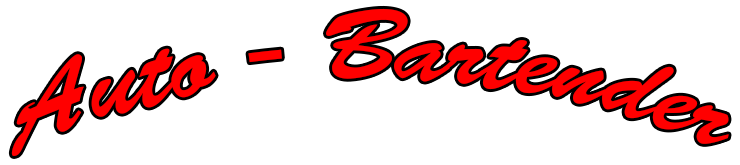
<style>
.page{position:relative;width:740px;height:165px;background:#ffffff}
.page>*{position:absolute;margin:0}
.t1{font:100px "BrushScriptStd";color:#ff0000}
</style>
<div class="page">
<p class="t1" style="left:11px;top:8px;width:718px;height:148px">Auto - Bartender</p>
</div>
